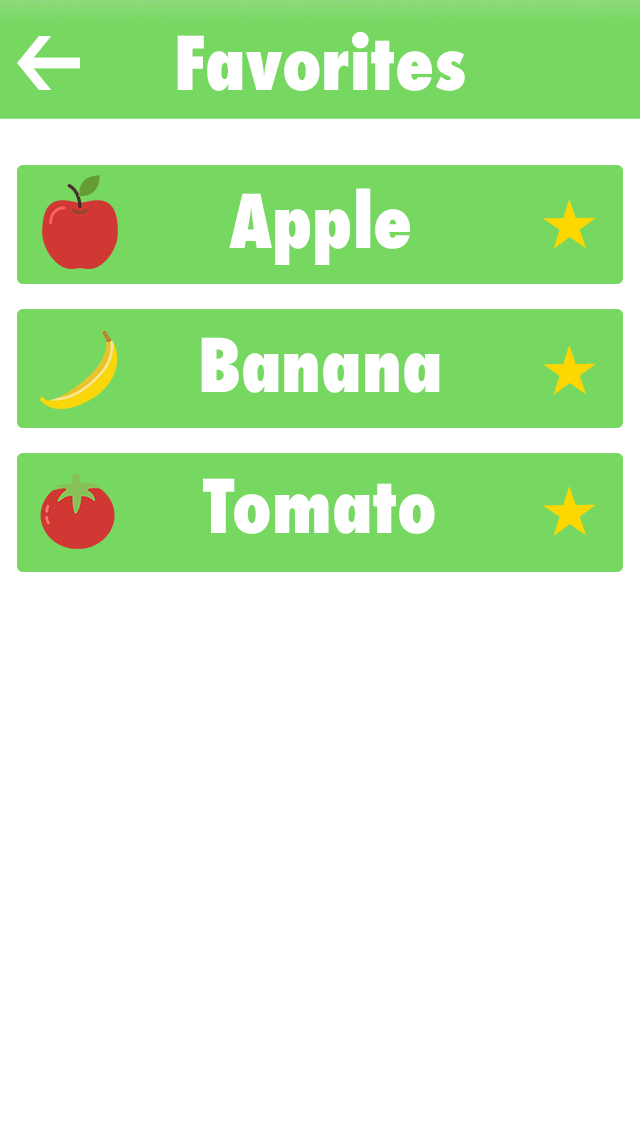
<style>
.page{position:relative;width:640px;height:1136px;background:#ffffff}
.page>*{position:absolute;margin:0}
.t1{font:72px "Futura-CondensedExtraBold";color:#ffffff}
</style>
<div class="page">
<p class="t1" style="left:177px;top:32px;width:288px;height:59px">Favorites</p>
<p class="t1" style="left:229px;top:188px;width:181px;height:77px">Apple</p>
<p class="t1" style="left:201px;top:337px;width:239px;height:56px">Banana</p>
<p class="t1" style="left:203px;top:478px;width:232px;height:56px">Tomato</p>
</div>
